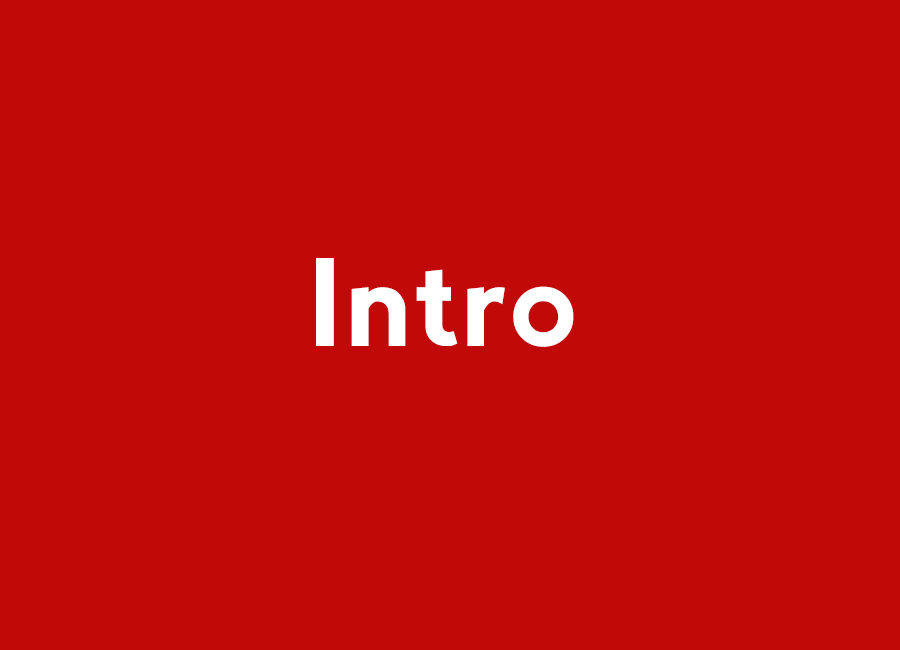
<style>
.page{position:relative;width:900px;height:650px;background:#c10909}
.page>*{position:absolute;margin:0}
.t1{font:120px "NevisBold";letter-spacing:0.015em;color:#ffffff}
</style>
<div class="page">
<p class="t1" style="left:316px;top:258px;width:258px;height:89px">Intro</p>
</div>
